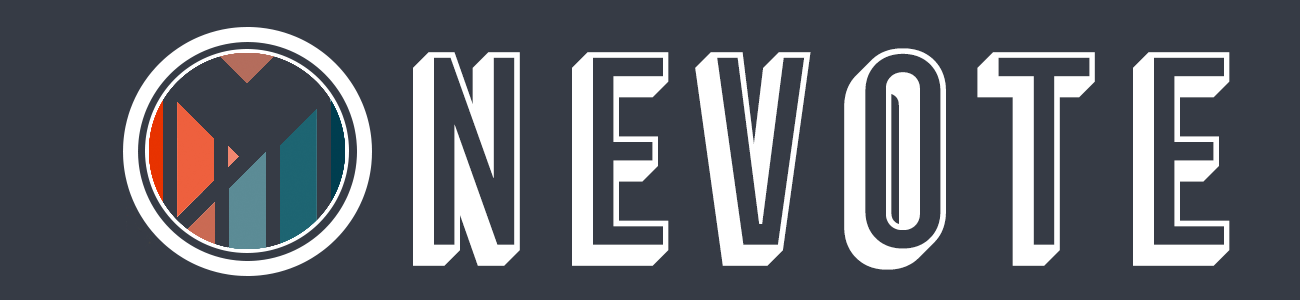
<style>
.page{position:relative;width:1300px;height:300px;background:#363b45}
.page>*{position:absolute;margin:0}
.t1{font:260px "FrontageCondensed-3D";color:#ffffff}
</style>
<div class="page">
<p class="t1" style="left:413px;top:48px;width:817px;height:222px">nevote</p>
</div>
